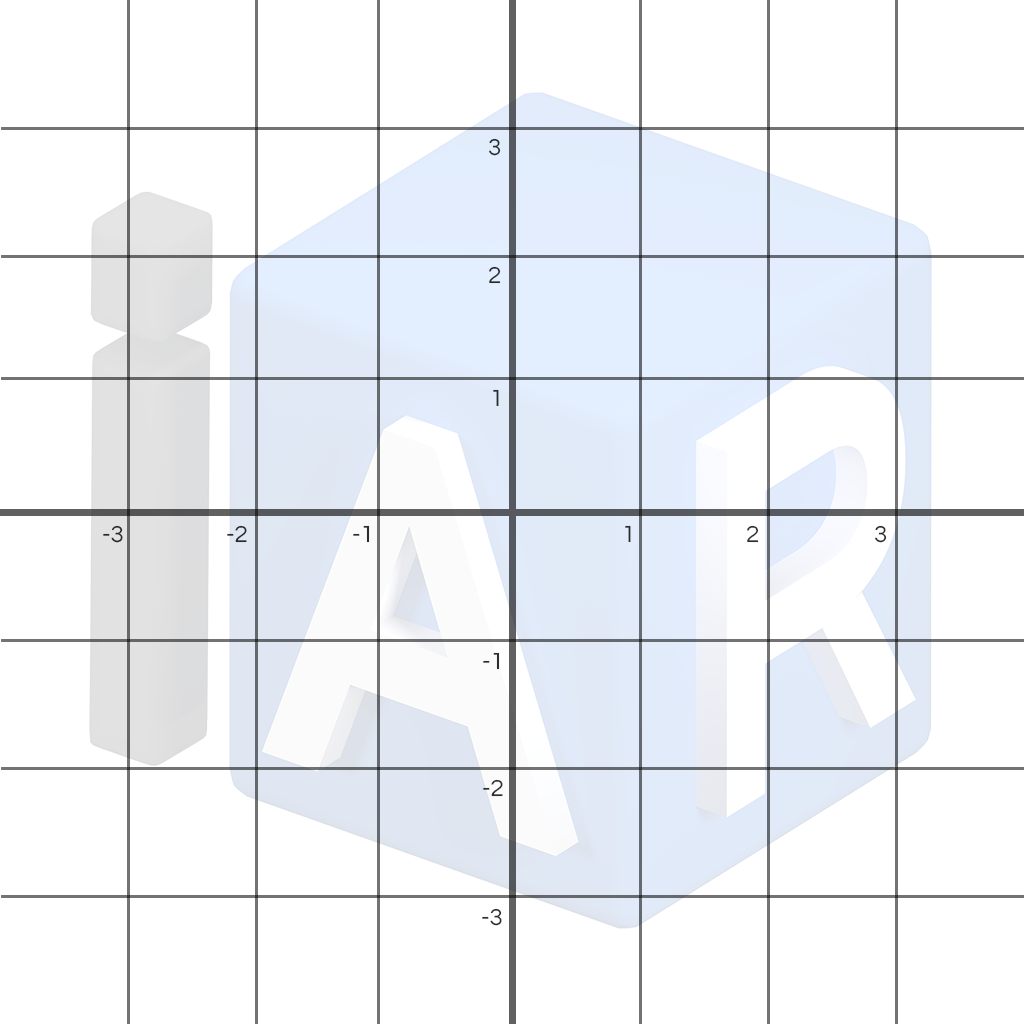
<style>
.page{position:relative;width:1024px;height:1024px;background:#ffffff}
.page>*{position:absolute;margin:0}
.t1{font:24px "Questrial-Regular";color:#292b2d}
.t2{font:24px "Questrial-Regular";color:#292b2e}
.t3{font:24px "Questrial-Regular";color:#292a2d}
.t4{font:24px "Questrial-Regular";color:#292929}
.t5{font:24px "Questrial-Regular";color:#282a2c}
.t6{font:24px "Questrial-Regular";color:#2d2d2d}
.t7{font:24px "Questrial-Regular";color:#2e2e2e}
</style>
<div class="page">
<p class="t1" style="left:489px;top:138px;width:12px;height:18px">3</p>
<p class="t2" style="left:489px;top:266px;width:12px;height:18px">2</p>
<p class="t3" style="left:493px;top:389px;width:6px;height:18px">1</p>
<p class="t4" style="left:103px;top:525px;width:20px;height:18px">-3</p>
<p class="t5" style="left:227px;top:525px;width:20px;height:18px">-2</p>
<p class="t6" style="left:353px;top:525px;width:17px;height:18px">-1</p>
<p class="t1" style="left:625px;top:525px;width:6px;height:18px">1</p>
<p class="t7" style="left:747px;top:525px;width:12px;height:18px">2</p>
<p class="t7" style="left:875px;top:525px;width:12px;height:18px">3</p>
<p class="t6" style="left:483px;top:652px;width:17px;height:18px">-1</p>
<p class="t6" style="left:483px;top:779px;width:20px;height:18px">-2</p>
<p class="t7" style="left:482px;top:908px;width:20px;height:18px">-3</p>
</div>
